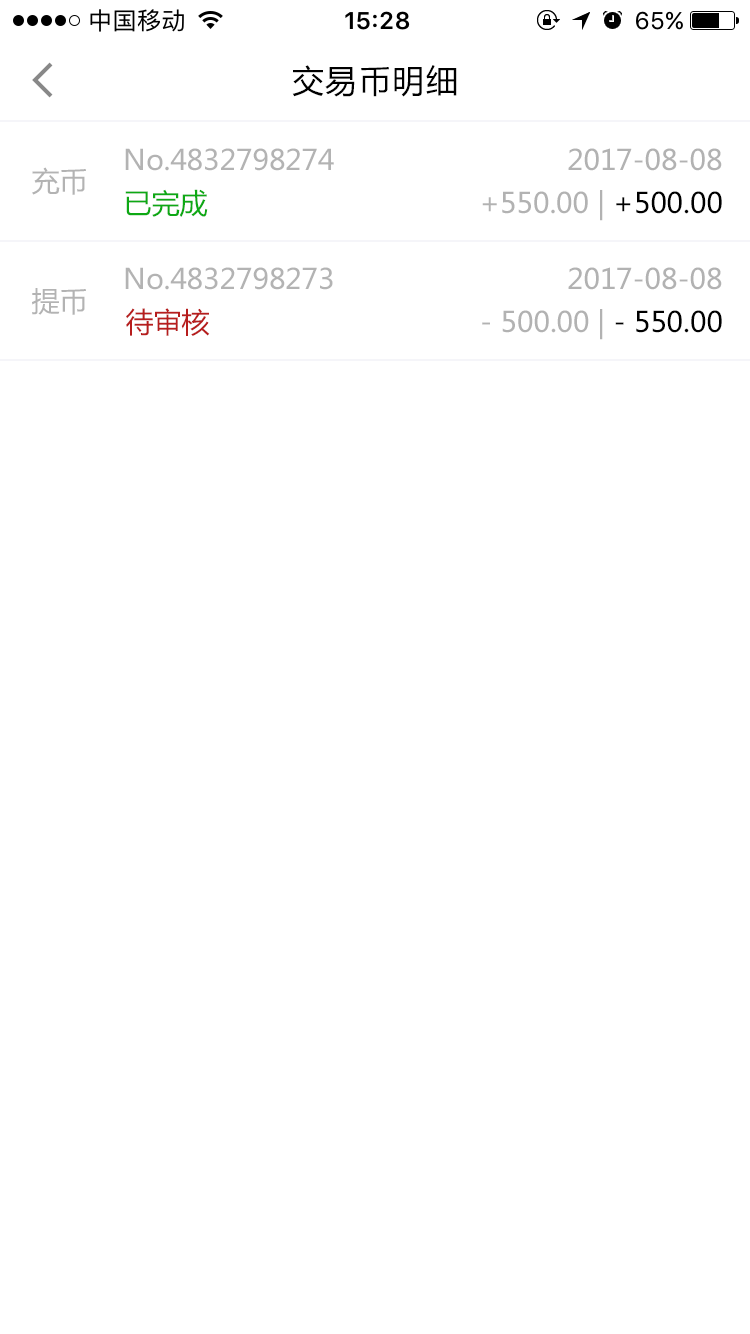
<style>
.page{position:relative;width:750px;height:1334px;background:#ffffff}
.page>*{position:absolute;margin:0}
.t1{font:32px "MicrosoftYaHei";letter-spacing:0.05em;color:#000000}
.t2{font:28px "MicrosoftYaHei";color:#b3b3b3}
.t3{font:28px "MicrosoftYaHei";color:#b1b1b1}
.t4{font:28px "MicrosoftYaHei";color:#0da914}
.t5{font:28px "MicrosoftYaHei";color:#b2b2b2}
.t6{font:28px "MicrosoftYaHei";color:#000000}
.t7{font:28px "MicrosoftYaHei";color:#b71d1d}
</style>
<div class="page">
<p class="t1" style="left:292px;top:65px;width:165px;height:32px">交易币明细</p>
<p class="t2" style="left:125px;top:148px;width:209px;height:23px">No.4832798274</p>
<p class="t3" style="left:568px;top:148px;width:154px;height:23px">2017-08-08</p>
<p class="t2" style="left:32px;top:167px;width:54px;height:28px">充币</p>
<p class="t4" style="left:125px;top:189px;width:83px;height:28px">已完成</p>
<p class="t5" style="left:482px;top:190px;width:240px;height:31px">+550.00 | <span class="t6">+500.00</span></p>
<p class="t2" style="left:125px;top:267px;width:208px;height:23px">No.4832798273</p>
<p class="t3" style="left:568px;top:267px;width:154px;height:23px">2017-08-08</p>
<p class="t2" style="left:32px;top:288px;width:54px;height:27px">提币</p>
<p class="t7" style="left:126px;top:308px;width:84px;height:28px">待审核</p>
<p class="t5" style="left:482px;top:309px;width:240px;height:31px">- 500.00 | <span class="t6">- 550.00</span></p>
</div>
